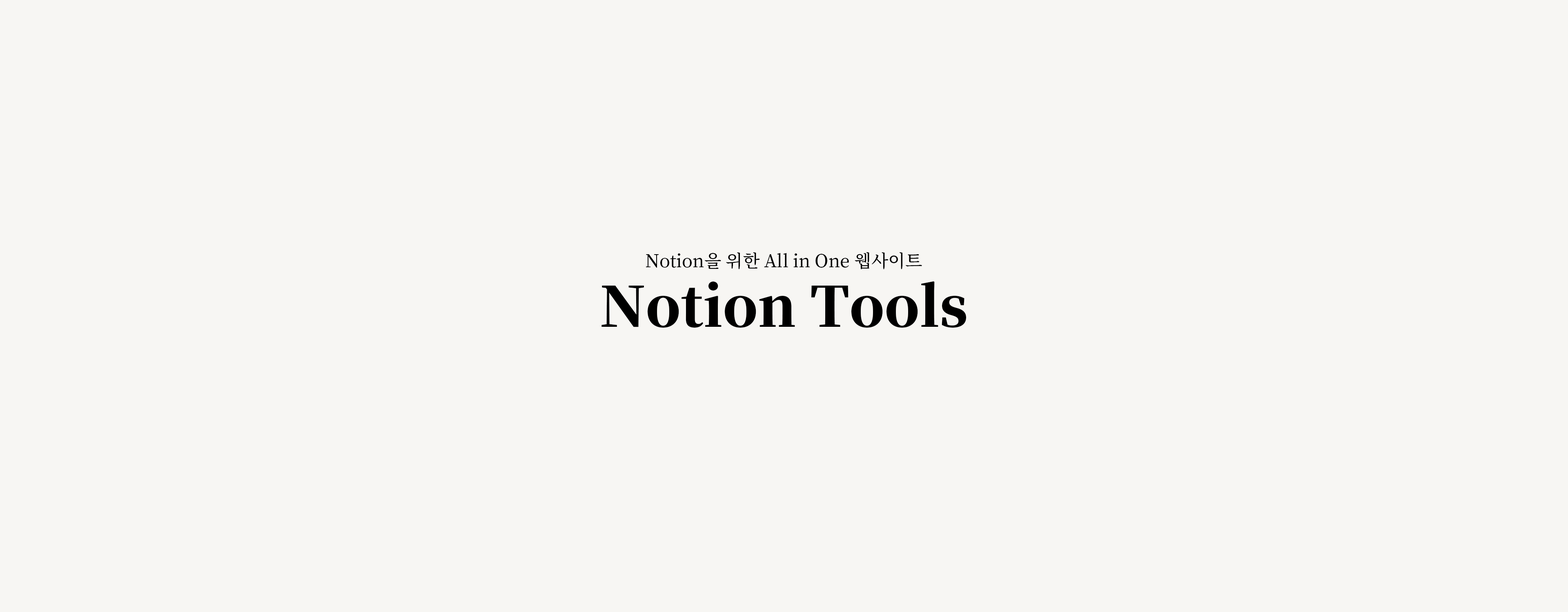
<style>
.page{position:relative;width:1568px;height:612px;background:#f7f6f3}
.page>*{position:absolute;margin:0}
.t1{font:17.6px "NotoSerifKR-Medium";color:#000000}
.t2{font:55.1px "NotoSerifKR-Black";color:#000000}
</style>
<div class="page">
<p class="t1" style="left:646px;top:252px;width:276px;height:18px">Notion을 위한 All in One 웹사이트</p>
<p class="t2" style="left:601px;top:281px;width:365px;height:47px">Notion Tools</p>
</div>
